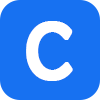
<style>
.page{position:relative;width:100px;height:100px;background:#1771f1}
.page>*{position:absolute;margin:0}
.t1{font:83.3px "BerlinSansFB-Reg";color:#ffffff;font-weight:bold;scale:0.95 1}
</style>
<div class="page">
<p class="t1" style="left:26px;top:21px;width:47px;height:60px">C</p>
</div>
